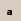
<style>
.page{position:relative;width:21px;height:21px;background:#d9cdc1}
.page>*{position:absolute;margin:0}
.t1{font:9px "Tahoma-Bold";color:#000000}
</style>
<div class="page">
<p class="t1" style="left:7px;top:10px;width:5px;height:5px">a</p>
</div>
